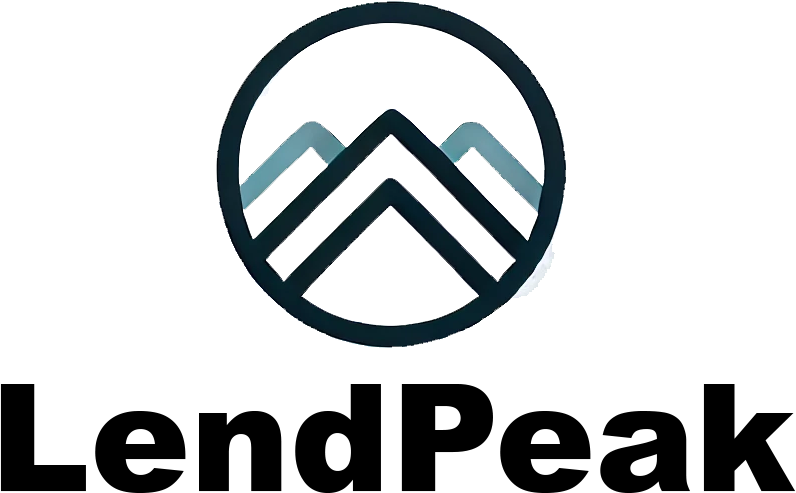
<style>
.page{position:relative;width:796px;height:493px;background:#ffffff}
.page>*{position:absolute;margin:0}
.t1{font:150px "Arial-Black";color:#000000}
</style>
<div class="page">
<p class="t1" style="left:0px;top:384px;width:796px;height:109px">LendPeak</p>
</div>
